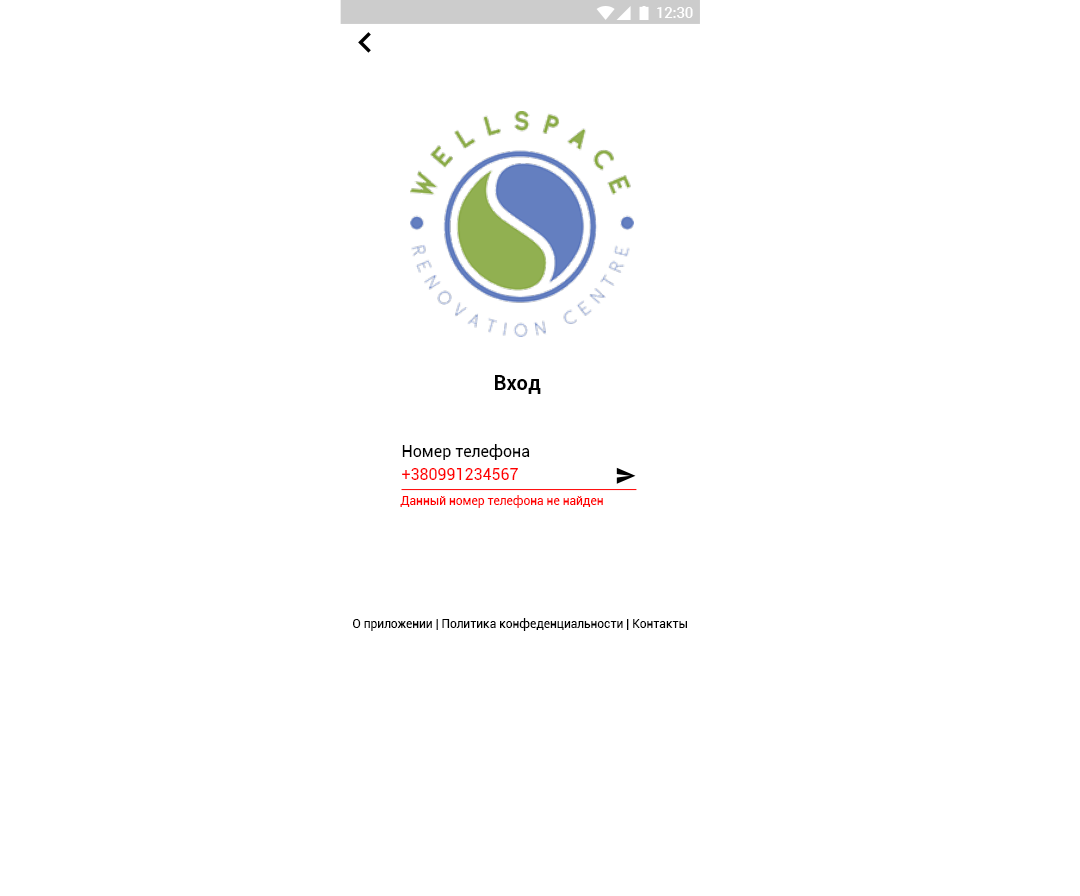
<style>
.page{position:relative;width:1080px;height:896px;background:#ffffff}
.page>*{position:absolute;margin:0}
.t1{font:14.6px "Roboto-Medium";color:#ffffff}
.t2{font:20px "Roboto-Bold";color:#000000}
.t3{font:16px "Roboto-Regular";color:#000000}
.t4{font:16px "Roboto-Regular";color:#ff0000}
.t5{font:12px "Roboto-Regular";color:#ff0000}
.t6{font:12px "Roboto-Regular";color:#000000}
</style>
<div class="page">
<p class="t1" style="left:657px;top:7px;width:36px;height:11px">12:30</p>
<p class="t2" style="left:495px;top:375px;width:46px;height:19px">Вход</p>
<p class="t3" style="left:402px;top:444px;width:128px;height:16px">Номер телефона</p>
<p class="t4" style="left:402px;top:468px;width:116px;height:12px">+380991234567</p>
<p class="t5" style="left:400px;top:495px;width:203px;height:13px">Данный номер телефона не найден</p>
<p class="t6" style="left:353px;top:618px;width:334px;height:13px">О приложении | Политика конфеденциальности | Контакты</p>
</div>
